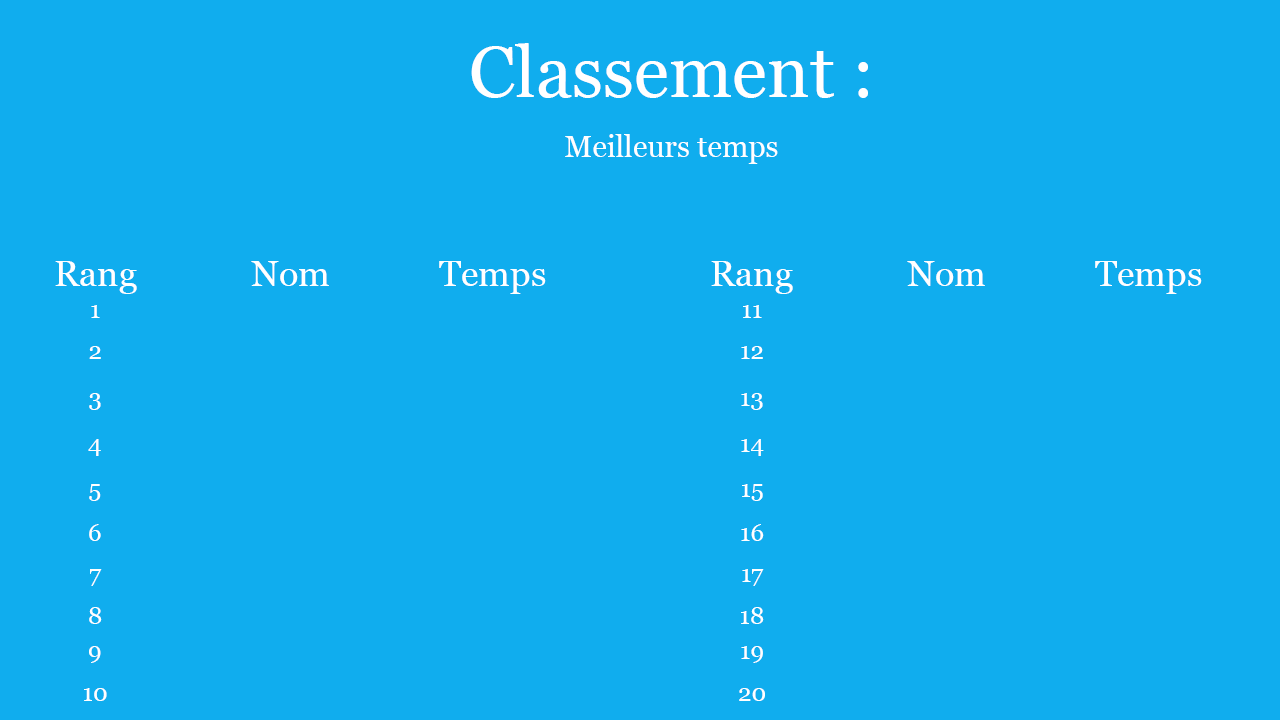
<style>
.page{position:relative;width:1280px;height:720px;background:#10adee}
.page>*{position:absolute;margin:0}
.t1{font:72px "Georgia";color:#ffffff}
.t2{font:30px "Georgia";color:#ffffff}
.t3{font:36px "Georgia";color:#ffffff}
.t4{font:24px "Georgia";color:#ffffff}
</style>
<div class="page">
<p class="t1" style="left:471px;top:43px;width:397px;height:55px">Classement :</p>
<p class="t2" style="left:565px;top:134px;width:213px;height:30px">Meilleurs temps</p>
<p class="t3" style="left:55px;top:261px;width:82px;height:33px">Rang</p>
<p class="t3" style="left:251px;top:261px;width:78px;height:25px">Nom</p>
<p class="t3" style="left:439px;top:261px;width:107px;height:33px">Temps</p>
<p class="t3" style="left:711px;top:261px;width:82px;height:33px">Rang</p>
<p class="t3" style="left:907px;top:261px;width:78px;height:25px">Nom</p>
<p class="t3" style="left:1095px;top:261px;width:107px;height:33px">Temps</p>
<p class="t4" style="left:91px;top:305px;width:9px;height:13px">1</p>
<p class="t4" style="left:743px;top:305px;width:19px;height:13px">11</p>
<p class="t4" style="left:89px;top:346px;width:12px;height:13px">2</p>
<p class="t4" style="left:741px;top:346px;width:22px;height:13px">12</p>
<p class="t4" style="left:89px;top:393px;width:12px;height:17px">3</p>
<p class="t4" style="left:741px;top:393px;width:22px;height:17px">13</p>
<p class="t4" style="left:88px;top:439px;width:13px;height:17px">4</p>
<p class="t4" style="left:741px;top:439px;width:23px;height:17px">14</p>
<p class="t4" style="left:89px;top:484px;width:12px;height:17px">5</p>
<p class="t4" style="left:742px;top:484px;width:21px;height:17px">15</p>
<p class="t4" style="left:89px;top:524px;width:12px;height:17px">6</p>
<p class="t4" style="left:741px;top:524px;width:23px;height:17px">16</p>
<p class="t4" style="left:90px;top:569px;width:12px;height:17px">7</p>
<p class="t4" style="left:742px;top:569px;width:22px;height:17px">17</p>
<p class="t4" style="left:89px;top:607px;width:13px;height:17px">8</p>
<p class="t4" style="left:741px;top:607px;width:23px;height:17px">18</p>
<p class="t4" style="left:89px;top:646px;width:12px;height:17px">9</p>
<p class="t4" style="left:741px;top:646px;width:22px;height:17px">19</p>
<p class="t4" style="left:84px;top:688px;width:23px;height:13px">10</p>
<p class="t4" style="left:739px;top:688px;width:26px;height:13px">20</p>
</div>
